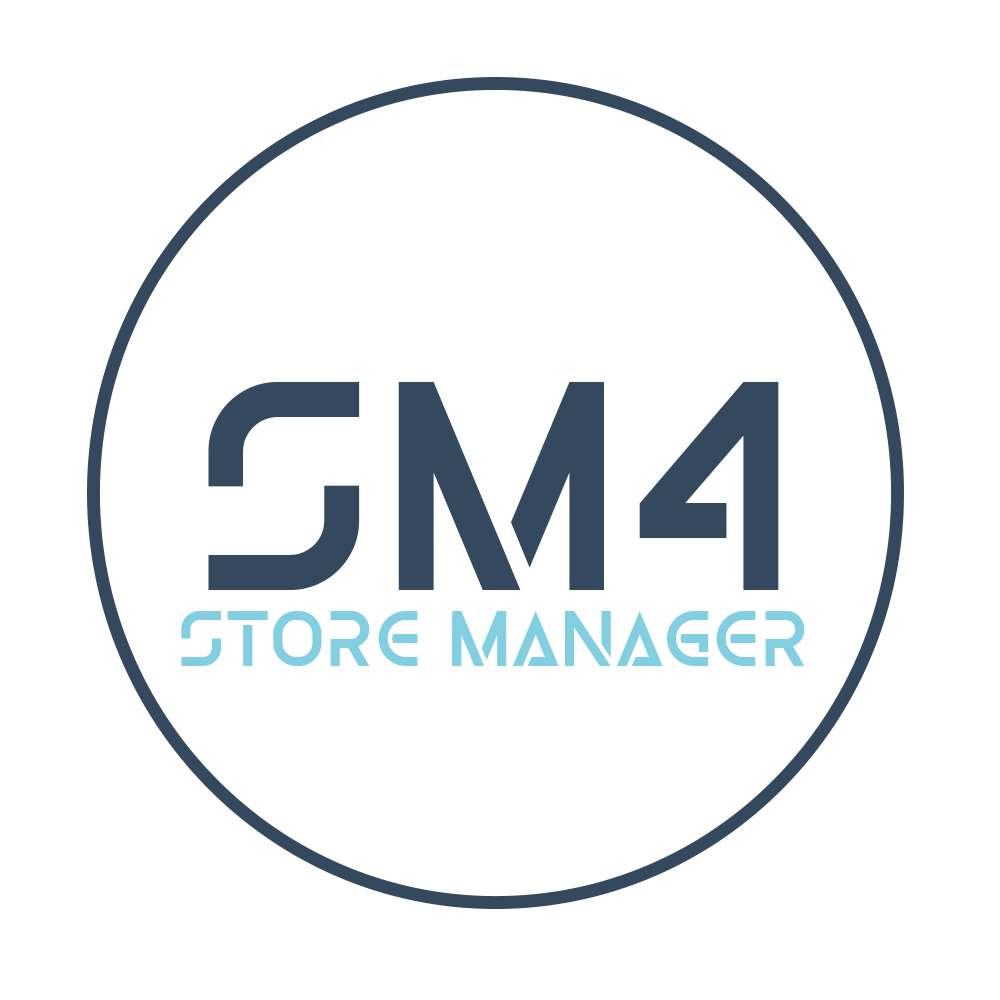
<style>
.page{position:relative;width:1000px;height:1000px;background:#ffffff}
.page>*{position:absolute;margin:0}
.t1{font:300px "Olga-Regular";color:#34495e}
.t2{font:79.2px "Olga-Regular";color:#81cfe0}
</style>
<div class="page">
<p class="t1" style="left:208px;top:381px;width:571px;height:209px">SM4</p>
<p class="t2" style="left:181px;top:611px;width:624px;height:55px">store manager</p>
</div>
